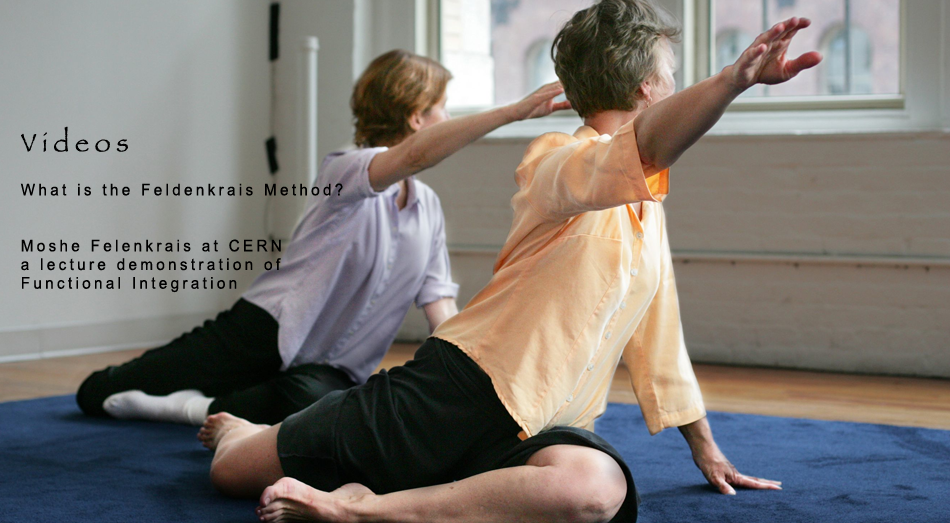
<style>
.page{position:relative;width:950px;height:523px}
.page>*{position:absolute;margin:0}
.t1{font:45.1px "Papyrus";letter-spacing:0.22em;color:#000000}
.t2{font:27.6px/18.7px "ArialMT";letter-spacing:0.22em;color:#000000;scale:0.94 1}
</style>
<div class="page">
<p class="t1" style="left:21px;top:126px;width:107px;height:26px">Videos</p>
<p class="t2" style="left:20px;top:183px;width:323px;height:110px">What is the Feldenkrais Method?<br><br><br>Moshe Felenkrais at CERN<br>a lecture demonstration of <br>Functional Integration</p>
</div>
